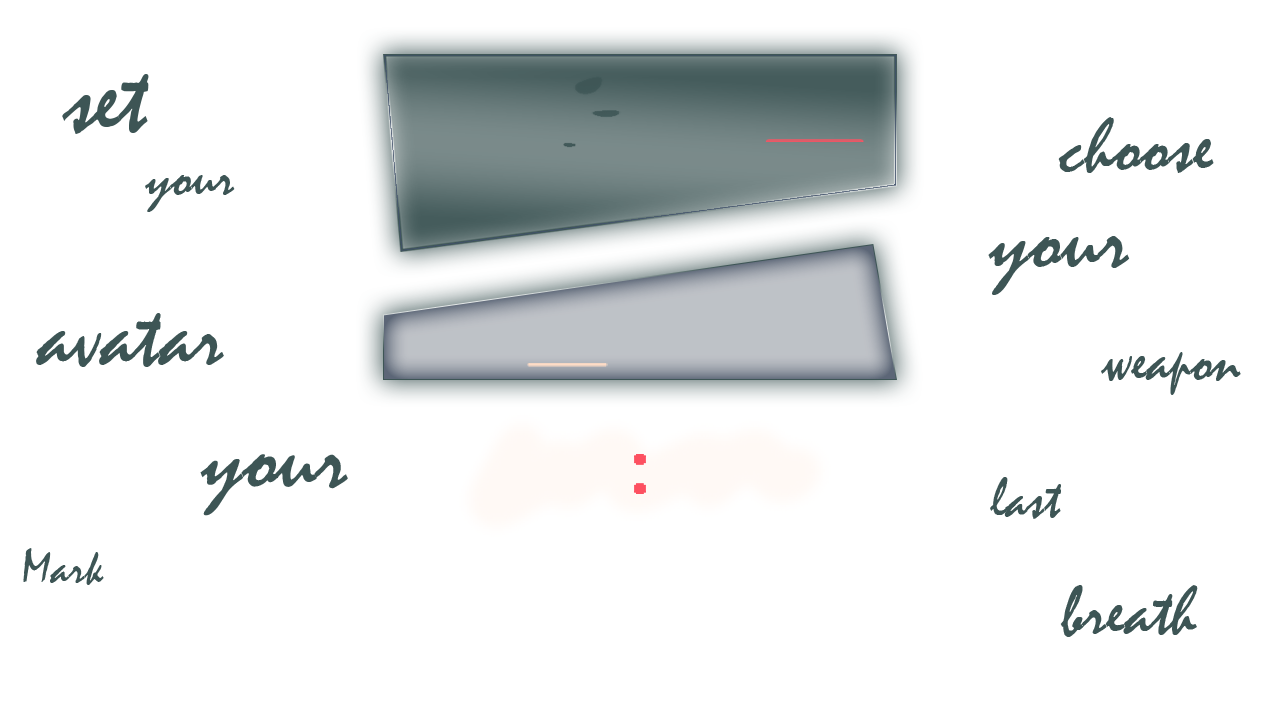
<style>
.page{position:relative;width:1280px;height:720px;background:#ffffff}
.page>*{position:absolute;margin:0}
.t1{font:101.1px "Mistral";color:#3d5555}
.t2{font:79.3px "Mistral";color:#3d5555}
.t3{font:59.3px "Mistral";color:#3d5555}
.t4{font:92.4px "Mistral";color:#3d5555}
.t5{font:90.6px "Mistral";color:#3d5555}
.t6{font:61.1px "Mistral";color:#3d5555}
.t7{font:97.6px "Mistral";color:#3d5555}
.t8{font:57.6px "Mistral";color:#3d5555}
.t9{font:48.9px "Mistral";color:#3d5555}
.t10{font:71.5px "Mistral";color:#3d5555}
</style>
<div class="page">
<p class="t1" style="left:62px;top:74px;width:87px;height:60px">set</p>
<p class="t2" style="left:1058px;top:117px;width:156px;height:56px">choose</p>
<p class="t3" style="left:145px;top:175px;width:90px;height:37px">your</p>
<p class="t4" style="left:988px;top:236px;width:142px;height:59px">your</p>
<p class="t5" style="left:36px;top:313px;width:188px;height:54px">avatar</p>
<p class="t6" style="left:1101px;top:352px;width:140px;height:43px">weapon</p>
<p class="t7" style="left:200px;top:454px;width:148px;height:62px;rotate:1deg">your</p>
<p class="t8" style="left:990px;top:477px;width:71px;height:42px">last</p>
<p class="t9" style="left:23px;top:548px;width:81px;height:37px">Mark</p>
<p class="t10" style="left:1060px;top:585px;width:138px;height:52px">breath</p>
</div>
